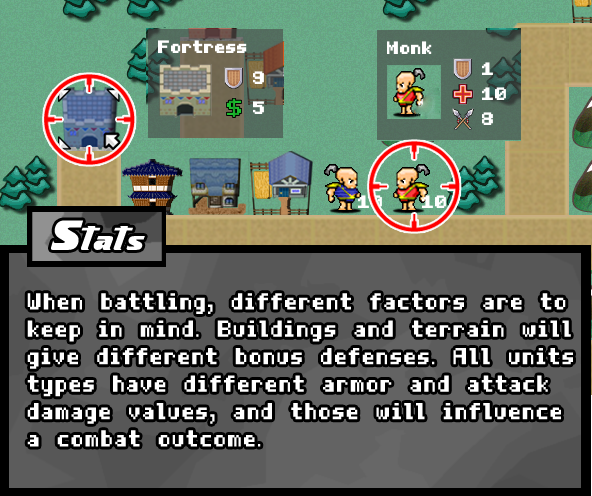
<style>
.page{position:relative;width:592px;height:496px}
.page>*{position:absolute;margin:0}
.t1{font:32.4px "-Xenogears";letter-spacing:0.05em;color:#ffffff}
.t2{font:22.9px "HalfBoldPixel-7";letter-spacing:0.075em;color:#ffffff;scale:0.9 1}
</style>
<div class="page">
<p class="t1" style="left:51px;top:220px;width:94px;height:30px">Stats</p>
<p class="t2" style="left:27px;top:293px;width:546px;height:154px">When battling, different factors are to keep in mind. Buildings and terrain will give different bonus defenses. All units types have different armor and attack damage values, and those will influence a combat outcome.</p>
</div>
